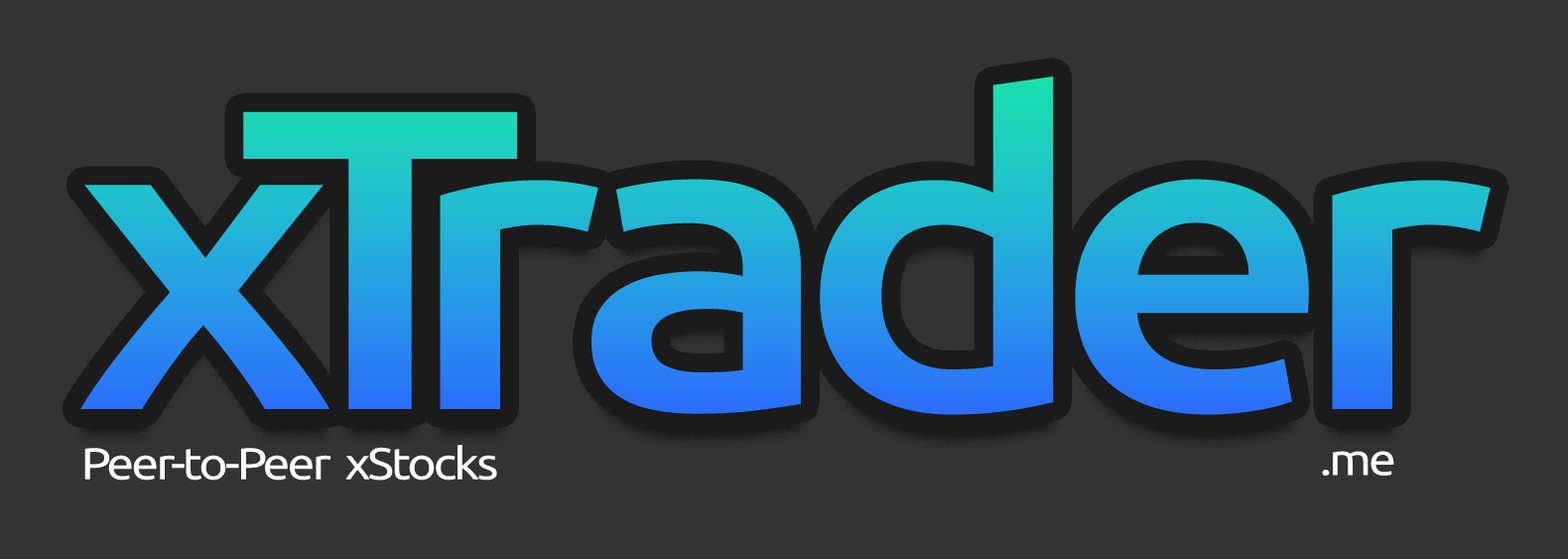
<style>
.page{position:relative;width:1568px;height:559px;background:#333333}
.page>*{position:absolute;margin:0}
.t1{font:44.7px "Ubuntu-Regular";letter-spacing:-0.06em;color:#ffffff;scale:1.11 1}
</style>
<div class="page">
<p class="t1" style="left:84px;top:444px;width:413px;height:36px">Peer-to-Peer  xStocks</p>
<p class="t1" style="left:1322px;top:451px;width:72px;height:24px">.me</p>
</div>
